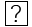
<style>
.page{position:relative;width:32px;height:27px;background:#ffffff}
.page>*{position:absolute;margin:0}
.t1{font:24px "Gulim";color:#000000}
</style>
<div class="page">
<p class="t1" style="left:11px;top:5px;width:10px;height:17px">?</p>
</div>
